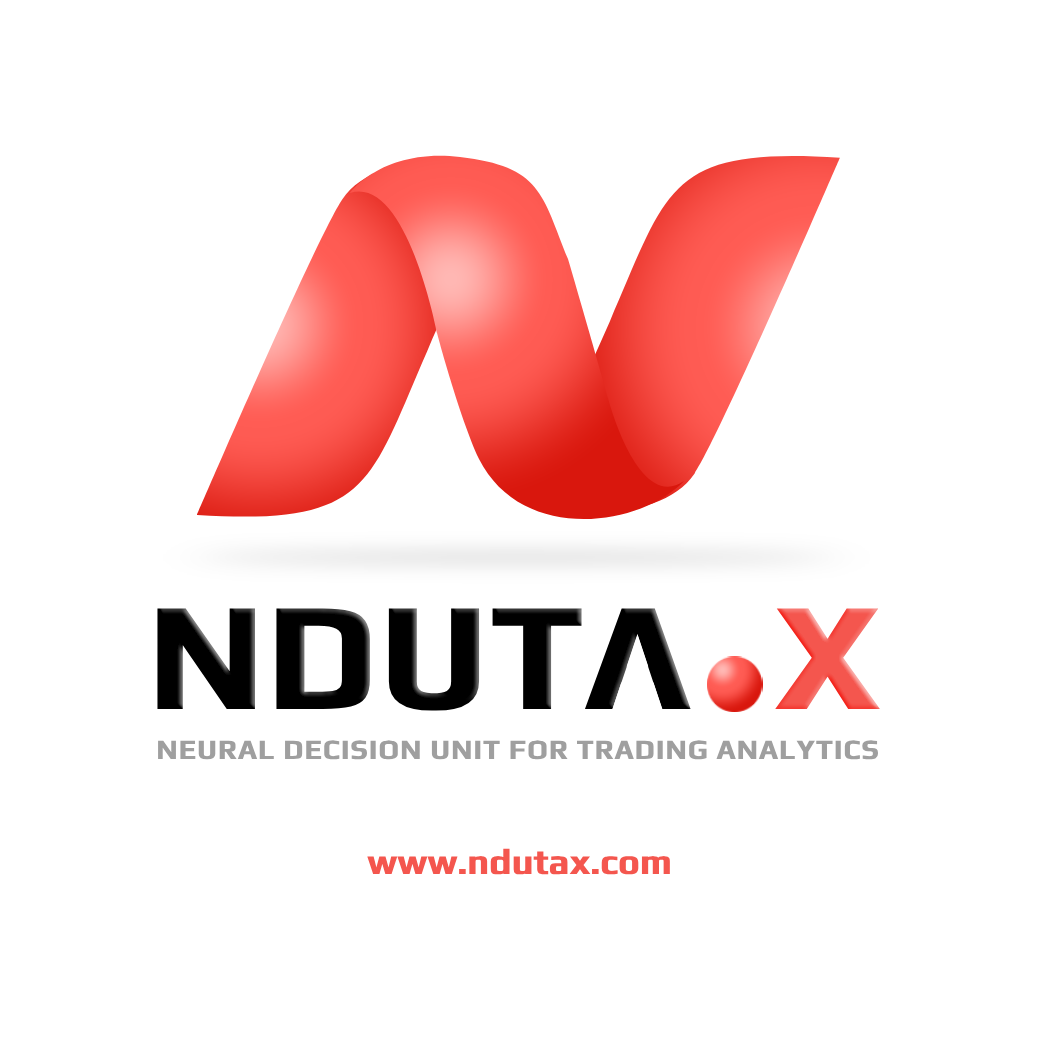
<style>
.page{position:relative;width:1037px;height:1037px;background:#ffffff}
.page>*{position:absolute;margin:0}
.t1{font:28px "Play-Bold";letter-spacing:0.02em;color:#9f9f9f;text-transform:uppercase;font-weight:bold}
.t2{font:36px "Play-Bold";letter-spacing:-0.013em;color:#f4564e;font-weight:bold}
</style>
<div class="page">
<p class="t1" style="left:158px;top:740px;width:720px;height:20px">Neural Decision Unit for Trading Analytics</p>
<p class="t2" style="left:367px;top:848px;width:303px;height:27px">www.ndutax.com</p>
</div>
